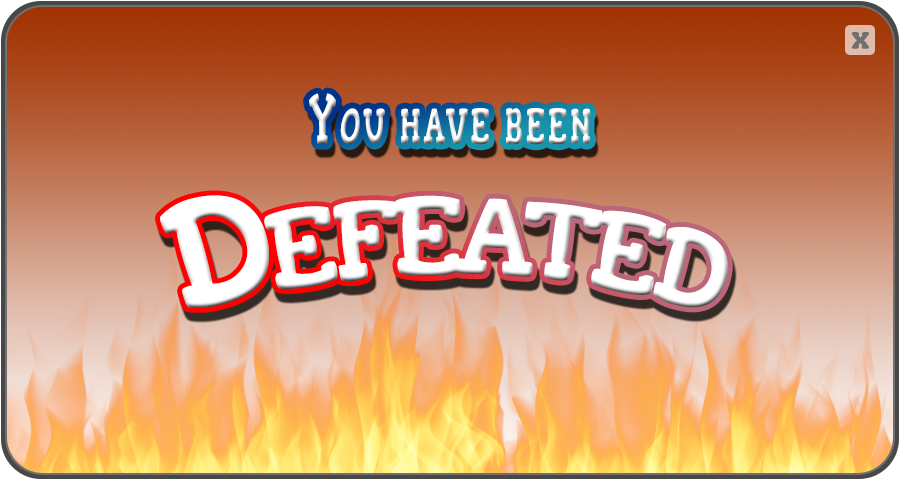
<style>
.page{position:relative;width:900px;height:480px}
.page>*{position:absolute;margin:0}
.t1{font:33.5px "Gorditas-Bold";color:#707070;font-variant:small-caps}
.t2{font:70.8px "Gorditas-Regular";letter-spacing:0.1em;font-variant:small-caps;scale:0.56 1}
.t3{font:155.8px "Gorditas-Regular";letter-spacing:-0.07em;color:#ffffff;font-variant:small-caps;scale:0.56 1}
</style>
<div class="page">
<p class="t1" style="left:851px;top:32px;width:18px;height:17px">x</p>
<p class="t2" style="left:309px;top:93px;width:282px;height:52px">You have been</p>
<p class="t3" style="left:160px;top:195px;width:568px;height:113px">Defeated</p>
</div>
